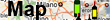
<style>
.page{position:relative;width:110px;height:20px}
.page>*{position:absolute;margin:0}
.t1{font:20px "Arial-BoldMT";color:#000000}
</style>
<div class="page">
<p class="t1" style="left:8px;top:1px;width:39px;height:19px">Map</p>
</div>
